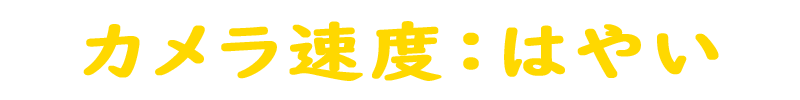
<style>
.page{position:relative;width:800px;height:100px;background:#ffffff}
.page>*{position:absolute;margin:0}
.t1{font:63.8px "UDDigiKyokashoNK-B";letter-spacing:0.05em;color:#ffd800;font-weight:bold;scale:1.18 1}
</style>
<div class="page">
<p class="t1" style="left:83px;top:21px;width:636px;height:60px">カメラ速度：はやい</p>
</div>
